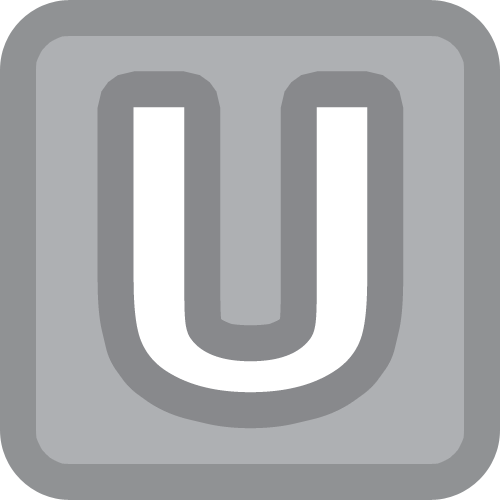
<style>
.page{position:relative;width:500px;height:500px;background:#aeb0b3}
.page>*{position:absolute;margin:0}
.t1{font:383px "Menlo-Regular";color:#ffffff;scale:1.33 1}
</style>
<div class="page">
<p class="t1" style="left:133px;top:107px;width:235px;height:286px">U</p>
</div>
